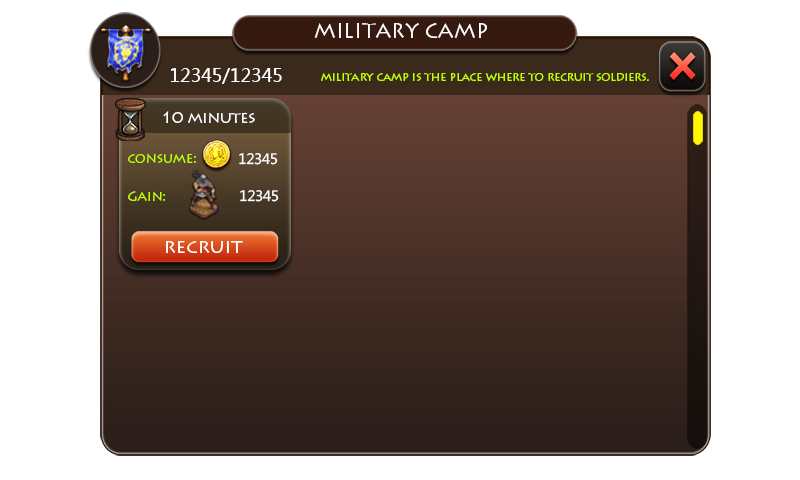
<style>
.page{position:relative;width:800px;height:480px;background:#ffffff}
.page>*{position:absolute;margin:0}
.t1{font:20px "LithosPro-Regular";color:#ffffff}
.t2{font:18px "MicrosoftYaHei";color:#ffffff}
.t3{font:11.9px "LithosPro-Regular";letter-spacing:-0.025em;color:#c0ff00}
.t4{font:16px "LithosPro-Regular";letter-spacing:-0.025em;color:#ffffff}
.t5{font:14px "LithosPro-Regular";letter-spacing:-0.025em;color:#c0ff00}
.t6{font:14px "MicrosoftYaHei";letter-spacing:-0.025em;color:#ffffff}
</style>
<div class="page">
<p class="t1" style="left:314px;top:23px;width:173px;height:15px">MILITARY CAMP</p>
<p class="t2" style="left:171px;top:68px;width:111px;height:16px">12345/12345</p>
<p class="t3" style="left:321px;top:73px;width:328px;height:9px">military camp is the place where to recruit soldiers.</p>
<p class="t4" style="left:163px;top:111px;width:92px;height:12px">10 minutes</p>
<p class="t5" style="left:128px;top:153px;width:68px;height:10px">consume:</p>
<p class="t6" style="left:239px;top:153px;width:39px;height:12px">12345</p>
<p class="t5" style="left:128px;top:191px;width:37px;height:10px">Gain:</p>
<p class="t6" style="left:240px;top:190px;width:39px;height:12px">12345</p>
<p class="t1" style="left:166px;top:241px;width:77px;height:12px">recruit</p>
</div>
